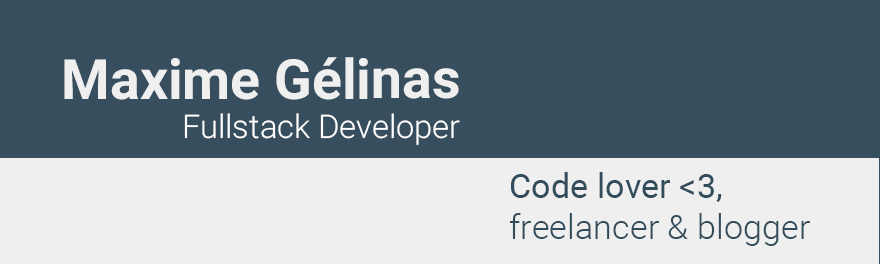
<style>
.page{position:relative;width:880px;height:264px;background:#364e5d}
.page>*{position:absolute;margin:0}
.t1{font:32.7px "Roboto-Light";color:#ffffff}
.t2{font:55.4px "Roboto-Bold";color:#f8eeef}
.t3{font:55.4px "Roboto-Bold";color:#efeff0}
.t4{font:34.3px "Roboto-Light";color:#324c5b}
.t5{font:34.3px "Roboto-Regular";color:#324c5b}
</style>
<div class="page">
<p class="t1" style="left:64px;top:57px;width:396px;height:88px;text-align:right"><span class="t2"><br></span><span class="t3">Maxime Gélinas<br></span>Fullstack Developer</p>
<p class="t4" style="left:509px;top:172px;width:301px;height:74px"><span class="t5">Code lover &lt;3, <br></span>freelancer &amp; blogger</p>
</div>
